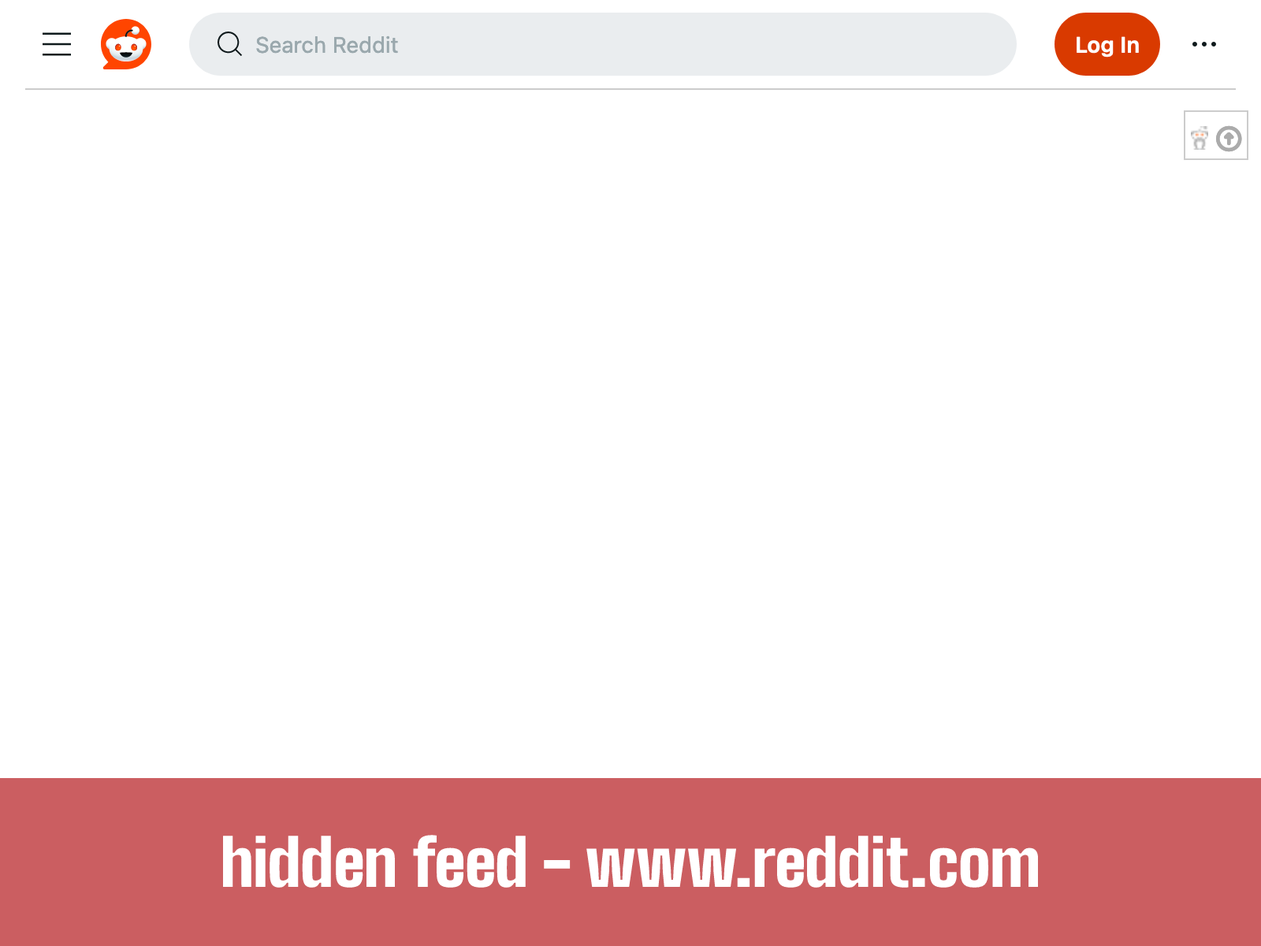
<style>
.page{position:relative;width:1261px;height:946px;background:#ffffff}
.page>*{position:absolute;margin:0}
.t1{font:63.8px "BigShouldersText-Black";color:#ffffff}
</style>
<div class="page">
<p class="t1" style="left:222px;top:835px;width:817px;height:52px">hidden feed - www.reddit.com</p>
</div>
